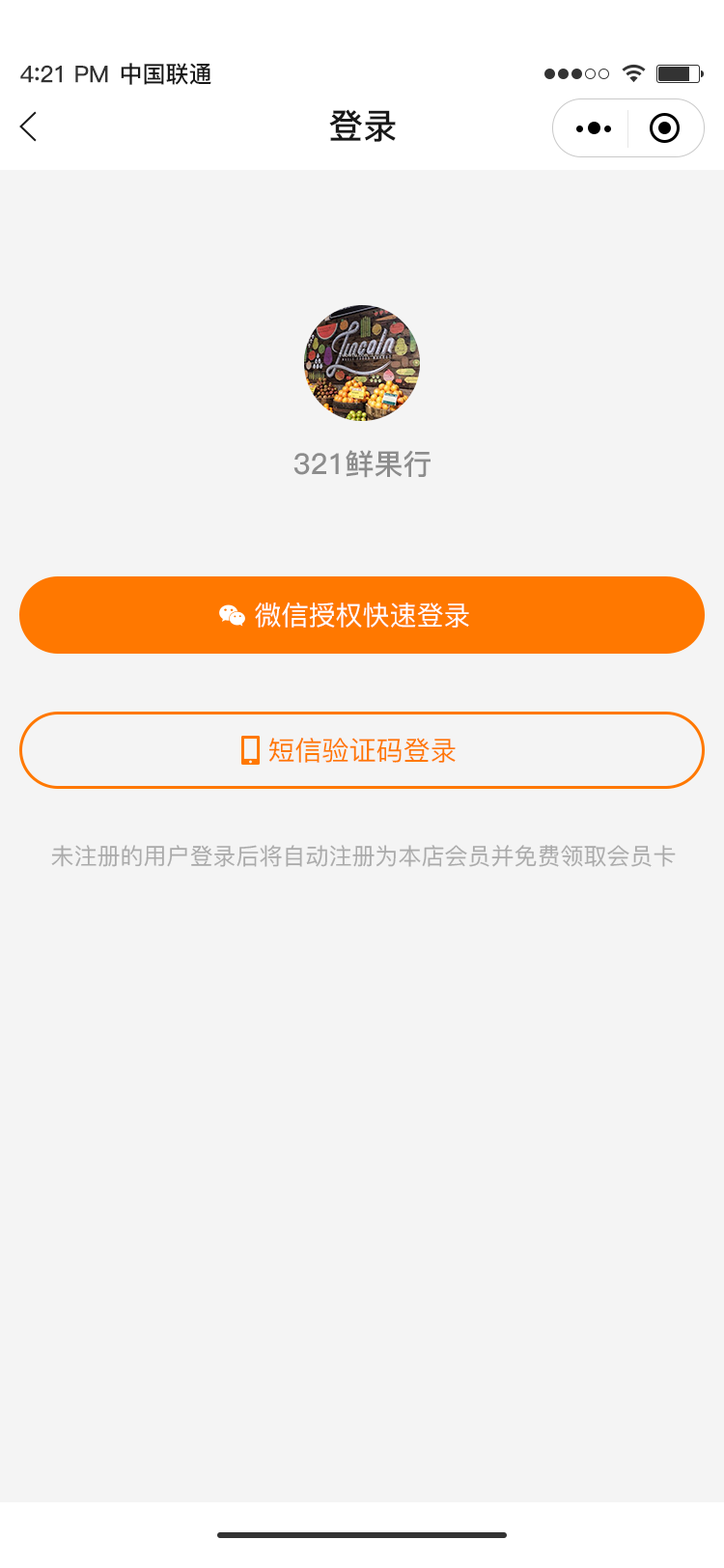
<style>
.page{position:relative;width:724px;height:1568px;background:#f4f4f4}
.page>*{position:absolute;margin:0}
.t1{font:23.2px "PingFang-SC-Bold";letter-spacing:-0.02em;color:#333333}
.t2{font:25.1px "PingFang-SC-Bold";letter-spacing:-0.02em;color:#333333}
.t3{font:23.2px "PingFang-SC-Bold";color:#181818}
.t4{font:34.8px "PingFang-SC-Bold";color:#181818}
.t5{font:29px "PingFang-SC-Bold";color:#8c8c8c}
.t6{font:27px "PingFang-SC-Medium";color:#ffffff}
.t7{font:27px "PingFang-SC-Medium";color:#ff7800}
.t8{font:23.2px "PingFang-SC-Medium";color:#aaaaaa}
</style>
<div class="page">
<p class="t1" style="left:20px;top:65px;width:88px;height:18px">4<span class="t2">:</span>21 PM</p>
<p class="t3" style="left:121px;top:63px;width:90px;height:22px">中国联通</p>
<p class="t4" style="left:329px;top:109px;width:67px;height:33px">登录</p>
<p class="t5" style="left:294px;top:450px;width:137px;height:28px">321鲜果行</p>
<p class="t6" style="left:255px;top:602px;width:214px;height:26px">微信授权快速登录</p>
<p class="t7" style="left:269px;top:738px;width:187px;height:25px">短信验证码登录</p>
<p class="t8" style="left:51px;top:845px;width:625px;height:22px">未注册的用户登录后将自动注册为本店会员并免费领取会员卡</p>
</div>
